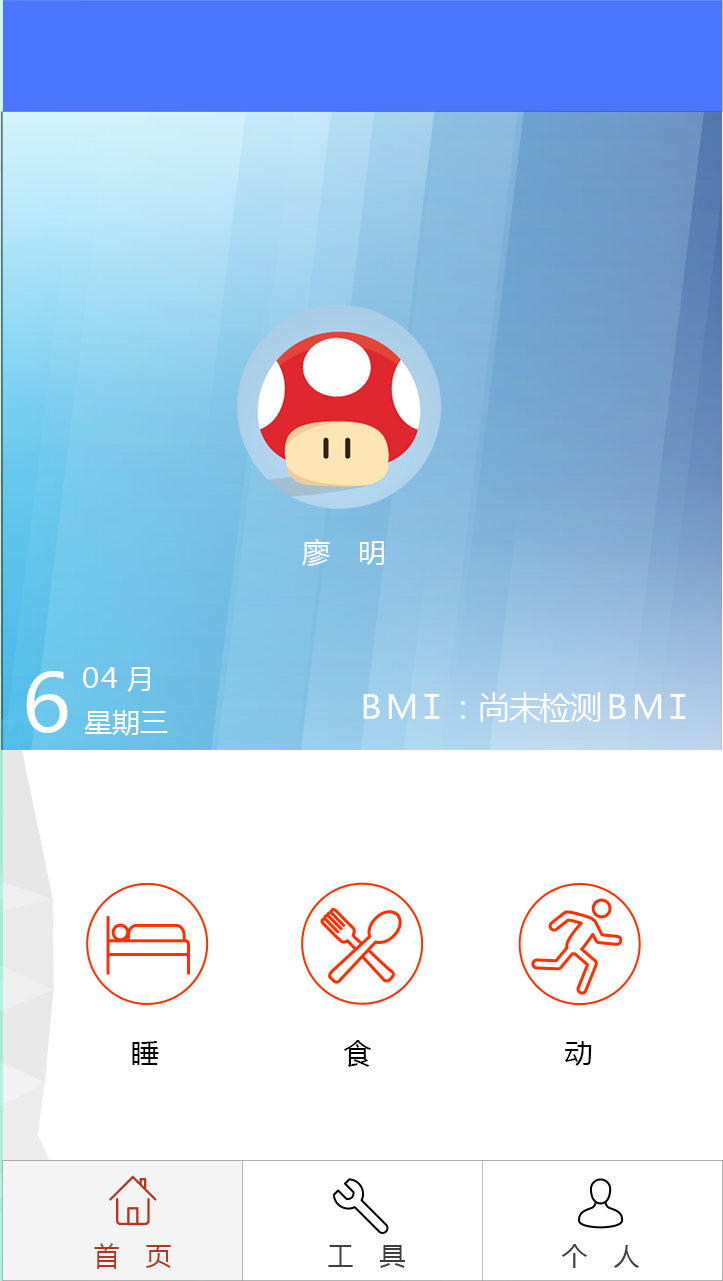
<style>
.page{position:relative;width:723px;height:1281px;background:#ffffff}
.page>*{position:absolute;margin:0}
.t1{font:28px "MicrosoftYaHei";color:#ffffff}
.t2{font:79.2px "MicrosoftYaHei";color:#ffffff}
.t3{font:28px "MicrosoftYaHei";letter-spacing:-0.32em;color:#ffffff}
.t4{font:32px "MicrosoftYaHei";letter-spacing:-0.04em;color:#ffffff}
.t5{font:28px "MicrosoftYaHei";color:#000000}
.t6{font:26px "MicrosoftYaHei";color:#3f3f3f}
.t7{font:26px "MicrosoftYaHei";color:#b43422}
</style>
<div class="page">
<p class="t1" style="left:302px;top:539px;width:82px;height:27px">廖　明</p>
<p class="t2" style="left:26px;top:671px;width:42px;height:62px">６</p>
<p class="t3" style="left:83px;top:667px;width:67px;height:25px">０４<span class="t1">月</span></p>
<p class="t4" style="left:363px;top:692px;width:323px;height:31px">ＢＭＩ：尚未检测ＢＭＩ</p>
<p class="t1" style="left:84px;top:710px;width:84px;height:26px">星期三</p>
<p class="t5" style="left:132px;top:1040px;width:460px;height:27px">睡　　　　　　  食　　　　　　   动</p>
<p class="t6" style="left:94px;top:1243px;width:546px;height:26px"><span class="t7">首　页</span>　　　　　　工　具　　　　　　个　人</p>
</div>
